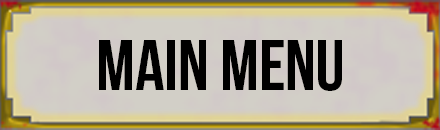
<style>
.page{position:relative;width:440px;height:130px}
.page>*{position:absolute;margin:0}
.t1{font:72px "BebasNeueBold";color:#000000}
</style>
<div class="page">
<p class="t1" style="left:99px;top:40px;width:243px;height:51px">MAIN MENU</p>
</div>
